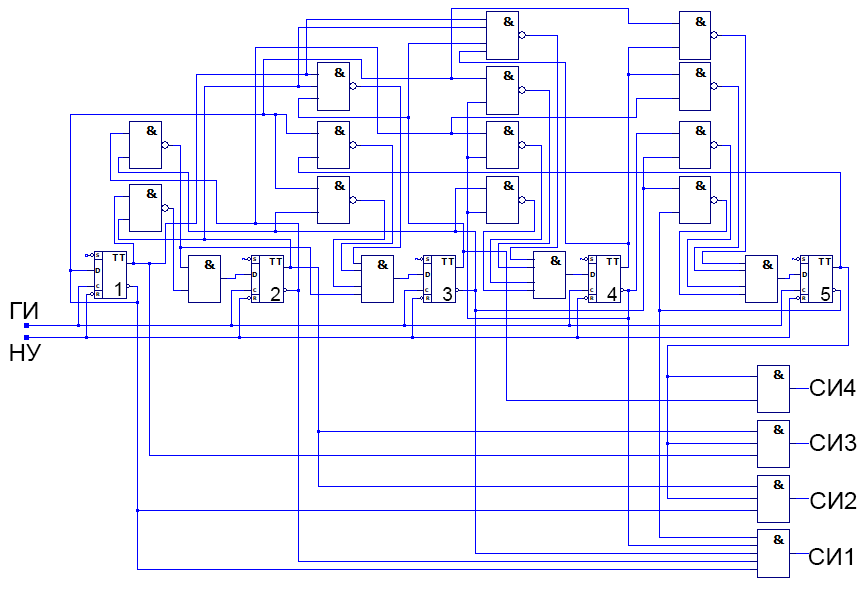
<style>
.page{position:relative;width:860px;height:598px;background:#ffffff}
.page>*{position:absolute;margin:0}
.t1{font:18.7px "ArialMT";color:#000000}
.t2{font:24px "ArialMT";color:#000000}
</style>
<div class="page">
<p class="t1" style="left:115px;top:282px;width:6px;height:14px">1</p>
<p class="t1" style="left:270px;top:287px;width:10px;height:14px">2</p>
<p class="t1" style="left:443px;top:287px;width:10px;height:14px">3</p>
<p class="t1" style="left:607px;top:287px;width:10px;height:14px">4</p>
<p class="t1" style="left:821px;top:287px;width:10px;height:14px">5</p>
<p class="t2" style="left:10px;top:302px;width:28px;height:17px">ГИ</p>
<p class="t2" style="left:10px;top:344px;width:32px;height:17px">НУ</p>
<p class="t2" style="left:809px;top:379px;width:33px;height:17px">СИ444444123444444444</p>
<p class="t2" style="left:843px;top:379px;width:13px;height:17px">4</p>
<p class="t2" style="left:809px;top:434px;width:48px;height:17px">СИ3</p>
<p class="t2" style="left:810px;top:492px;width:47px;height:17px">СИ2</p>
<p class="t2" style="left:808px;top:548px;width:45px;height:17px">СИ1</p>
</div>
